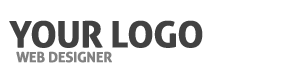
<style>
.page{position:relative;width:300px;height:80px;background:#ffffff}
.page>*{position:absolute;margin:0}
.t1{font:36px "Aller-Bold";letter-spacing:-0.025em;color:#414141;font-weight:bold}
.t2{font:14px "Aller-Bold";letter-spacing:-0.025em;color:#818181;font-weight:bold}
</style>
<div class="page">
<p class="t1" style="left:9px;top:20px;width:194px;height:28px">YOUR LOGO</p>
<p class="t2" style="left:16px;top:51px;width:96px;height:12px">WEB DESIGNER</p>
</div>
